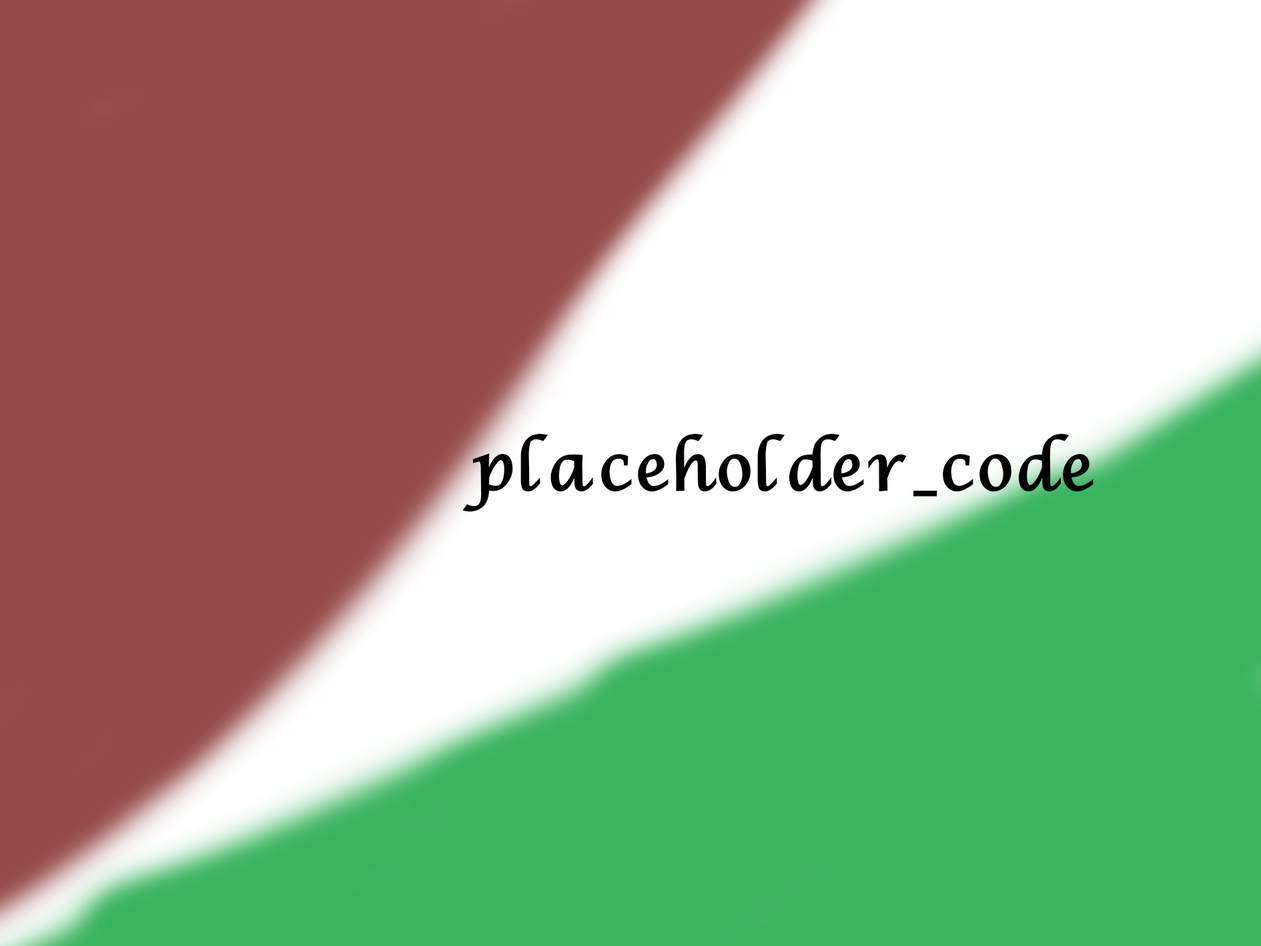
<style>
.page{position:relative;width:1261px;height:946px;background:#964a4a}
.page>*{position:absolute;margin:0}
.t1{font:80.7px "IranNastaliq";color:#000000}
</style>
<div class="page">
<p class="t1" style="left:462px;top:433px;width:632px;height:79px">placeholder_code</p>
</div>
